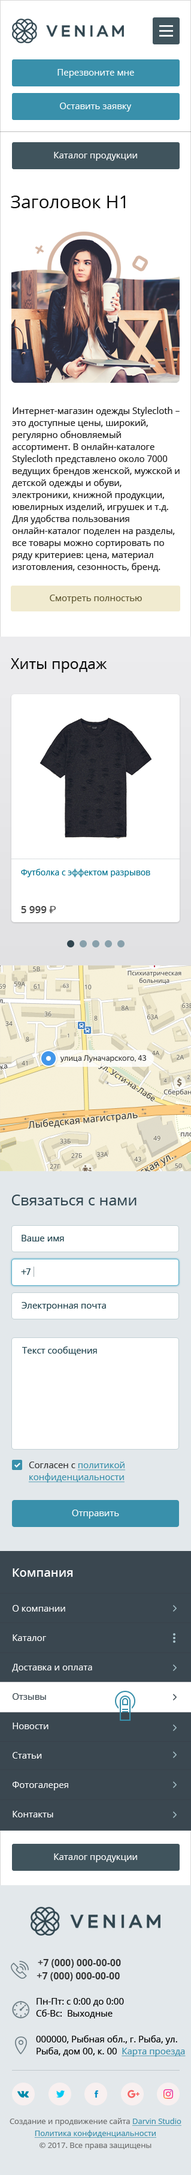
<style>
.page{position:relative;width:191px;height:2175px;background:#ffffff}
.page>*{position:absolute;margin:0}
.t1{font:9px "OpenSans-Regular";color:#ffffff}
.t2{font:18px "OpenSans-Regular";color:#0d0d0d}
.t3{font:9px/12px "OpenSans-Regular";color:#1d1d1d}
.t4{font:9px "OpenSans-Regular";color:#5f5733}
.t5{font:15px "OpenSans-Regular";color:#0d0d0d}
.t6{font:8.4px "OpenSans-Regular";color:#007390}
.t7{font:10.2px "OpenSans-SemiBold";color:#474747}
.t8{font:10.2px "Roboto-Regular";color:#474747}
.t9{font:15px "OpenSans-Regular";color:#30454f}
.t10{font:9px "OpenSans-Regular";color:#1e414c}
.t11{font:9px "Rubik-Regular";color:#1e414c}
.t12{font:9px/12px "OpenSans-Regular";color:#3990ab;text-decoration:underline}
.t13{font:9px/12px "OpenSans-Regular";color:#333333}
.t14{font:12px "OpenSans-SemiBold";color:#ffffff}
.t15{font:9px/29.4px "OpenSans-Regular";color:#ffffff}
.t16{font:9px/29.4px "OpenSans-Regular";color:#3a4750}
.t17{font:9.6px/3px "OpenSans-Bold";color:#343434}
.t18{font:9.6px/13.2px "OpenSans-Bold";color:#343434}
.t19{font:9px/12px "OpenSans-Regular";color:#000000}
.t20{font:9px/12px "OpenSans-Regular";color:#46748f}
.t21{font:9px/12px "OpenSans-Regular";color:#3a8fab;text-decoration:underline}
.t22{font:7.8px/12px "OpenSans-Regular";color:#3a8fab;text-decoration:underline}
.t23{font:7.8px/12px "OpenSans-Regular";color:#6e6e6e}
</style>
<div class="page">
<p class="t1" style="left:58px;top:69px;width:76px;height:9px">Перезвоните мне</p>
<p class="t1" style="left:60px;top:103px;width:72px;height:9px">Оставить заявку</p>
<p class="t1" style="left:54px;top:152px;width:83px;height:9px">Каталог продукции</p>
<p class="t2" style="left:11px;top:196px;width:114px;height:12px">Заголовок Н1</p>
<p class="t3" style="left:12px;top:407px;width:168px;height:165px">Интернет-магазин одежды Stylecloth – это доступные цены, широкий, регулярно обновляемый ассортимент. В онлайн-каталоге Stylecloth представлено около 7000 ведущих брендов женской, мужской и детской одежды и обуви, электроники, книжной продукции, ювелирных изделий, игрушек и т.д. Для удобства пользования онлайн-каталог поделен на разделы, все товары можно сортировать по ряду критериев: цена, материал изготовления, сезонность, бренд.</p>
<p class="t4" style="left:50px;top:595px;width:92px;height:9px">Смотреть полностью</p>
<p class="t5" style="left:11px;top:658px;width:96px;height:15px">Хиты продаж</p>
<p class="t6" style="left:21px;top:869px;width:130px;height:8px">Футболка с эффектом разрывов</p>
<p class="t7" style="left:21px;top:906px;width:35px;height:7px">5 999 <span class="t8">₽</span></p>
<p class="t9" style="left:11px;top:1195px;width:126px;height:10px">Связаться с нами</p>
<p class="t10" style="left:22px;top:1235px;width:42px;height:6px">Ваше имя</p>
<p class="t11" style="left:21px;top:1268px;width:10px;height:7px">+7</p>
<p class="t10" style="left:22px;top:1302px;width:84px;height:9px">Электронная почта</p>
<p class="t10" style="left:22px;top:1346px;width:75px;height:9px">Текст сообщения</p>
<p class="t12" style="left:28px;top:1462px;width:98px;height:21px"><span class="t13">Согласен с </span>политикой<br>конфиденциальности</p>
<p class="t1" style="left:72px;top:1510px;width:47px;height:9px">Отправить</p>
<p class="t14" style="left:13px;top:1568px;width:60px;height:9px">Компания</p>
<p class="t15" style="left:12px;top:1605px;width:80px;height:212px">О компании<br>Каталог<br>Доставка и оплата<br><span class="t16">Отзывы<br></span>Новости<br>Статьи<br>Фотогалерея<br>Контакты</p>
<p class="t1" style="left:54px;top:1853px;width:83px;height:9px">Каталог продукции</p>
<p class="t17" style="left:37px;top:1959px;width:84px;height:22px">+7 (000) 000-00-00<br><span class="t18">  +7 (000) 000-00-00</span></p>
<p class="t19" style="left:36px;top:1998px;width:88px;height:20px"><span class="t20"><br></span>Пн-Пт: с 0:00 до 0:00<br>Сб-Вс:  Выходные</p>
<p class="t19" style="left:36px;top:2035px;width:150px;height:22px">000000, Рыбная обл., г. Рыба, ул. Рыба, дом 00, к. 00  <span class="t21">Карта проезда</span></p>
<p class="t22" style="left:10px;top:2118px;width:172px;height:32px;text-align:center"><span class="t23">Создание и продвижение сайта </span>Darvin Studio<br>Политика конфиденциальности<br><span class="t23">© 2017. Все права защищены</span></p>
</div>
